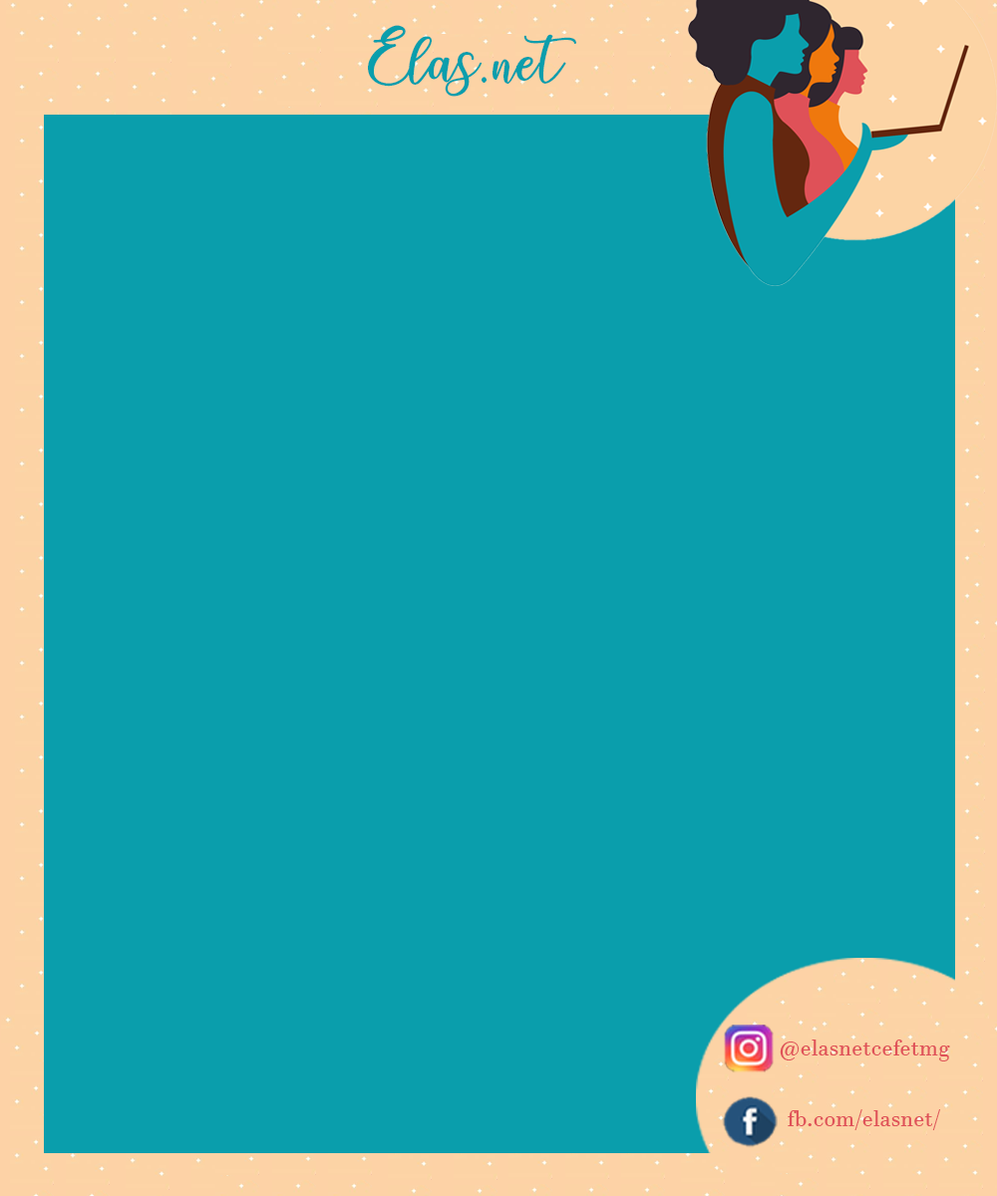
<style>
.page{position:relative;width:997px;height:1196px;background:#0a9eac}
.page>*{position:absolute;margin:0}
.t1{font:55.8px "charlinda-Regular";color:#0a9eac}
.t2{font:23.3px "JavaneseText";color:#df5158}
</style>
<div class="page">
<p class="t1" style="left:368px;top:25px;width:208px;height:72px">Elas.net</p>
<p class="t2" style="left:780px;top:1040px;width:170px;height:22px">@elasnetcefetmg</p>
<p class="t2" style="left:788px;top:1109px;width:152px;height:21px">fb.com/elasnet/</p>
</div>
